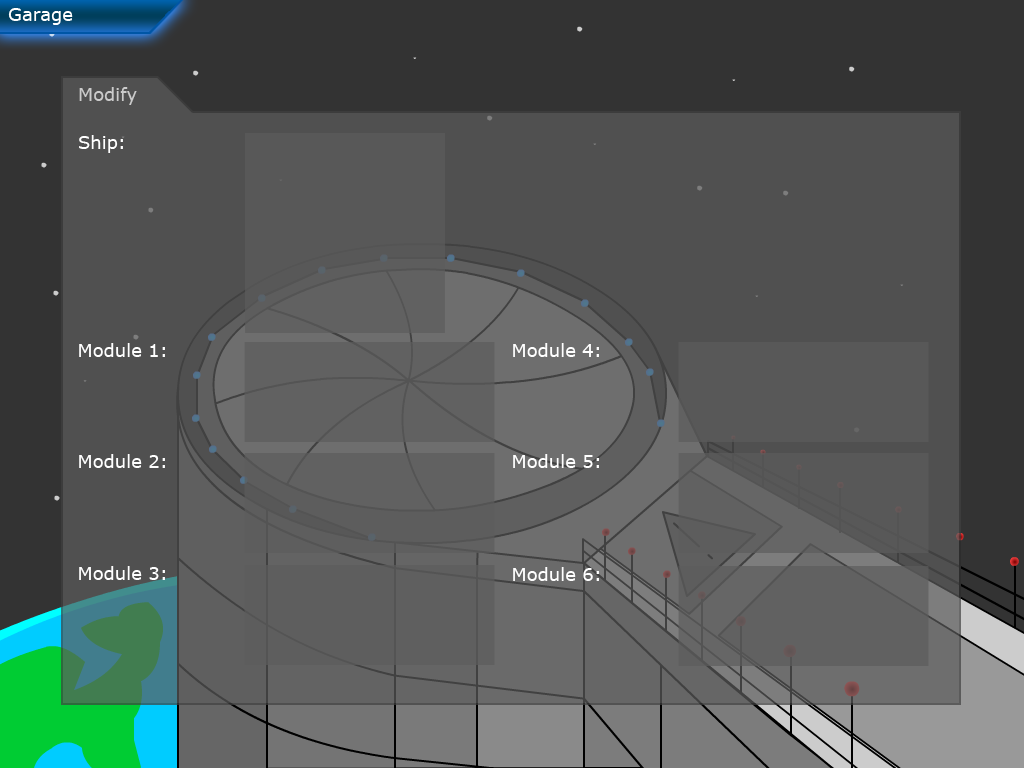
<style>
.page{position:relative;width:1024px;height:768px;background:#505050}
.page>*{position:absolute;margin:0}
.t1{font:18px "Verdana";color:#ffffff}
.t2{font:18px "Verdana";color:#cbcbcb}
</style>
<div class="page">
<p class="t1" style="left:8px;top:8px;width:65px;height:17px">Garage</p>
<p class="t2" style="left:79px;top:87px;width:58px;height:18px">Modify</p>
<p class="t1" style="left:79px;top:135px;width:44px;height:18px">Ship:</p>
<p class="t1" style="left:79px;top:343px;width:86px;height:14px">Module 1:</p>
<p class="t1" style="left:513px;top:343px;width:86px;height:14px">Module 4:</p>
<p class="t1" style="left:79px;top:454px;width:86px;height:14px">Module 2:</p>
<p class="t1" style="left:513px;top:454px;width:86px;height:14px">Module 5:</p>
<p class="t1" style="left:79px;top:566px;width:86px;height:14px">Module 3:</p>
<p class="t1" style="left:513px;top:567px;width:86px;height:14px">Module 6:</p>
</div>
